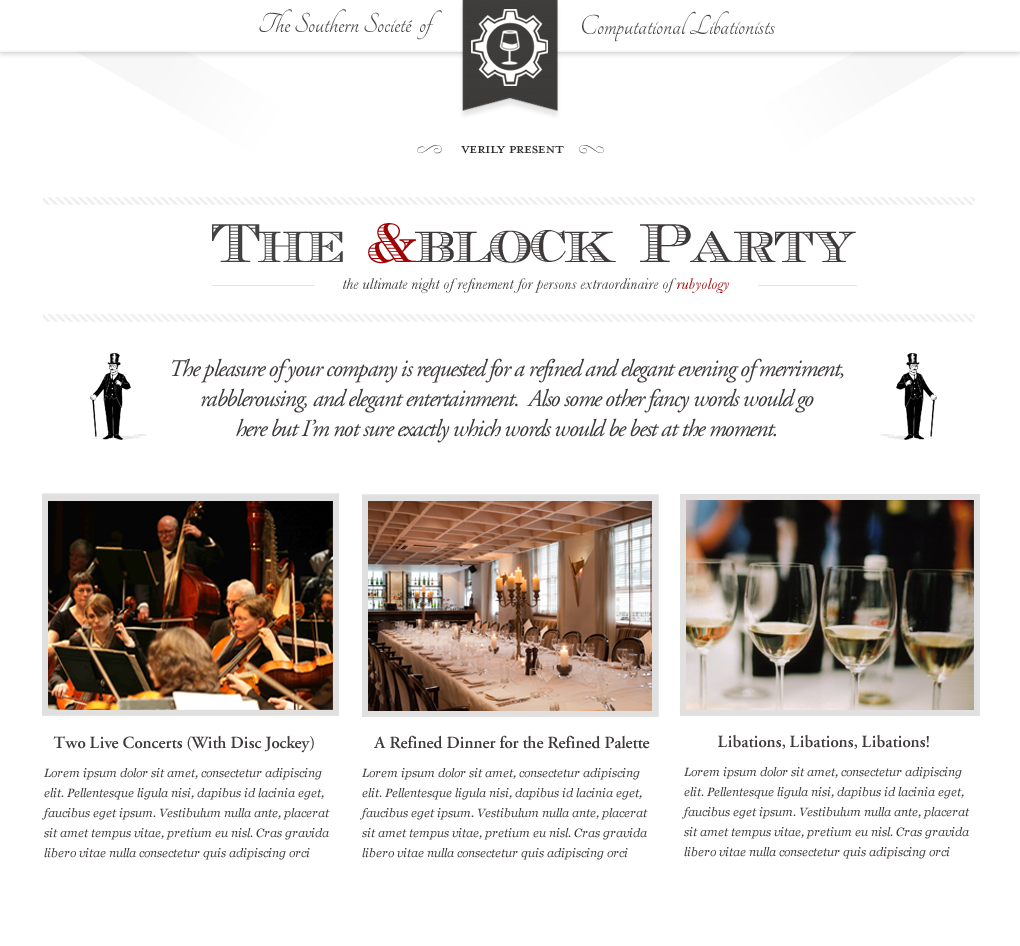
<style>
.page{position:relative;width:1020px;height:946px;background:#ffffff}
.page>*{position:absolute;margin:0}
.t1{font:30px "Tangerine";color:#474545}
.t2{font:24px "Nymphette";letter-spacing:-0.05em}
.t3{font:21px "MrsEavesPetiteCaps";letter-spacing:-0.05em;color:#2e2c2c}
.t4{font:56px "EcuyerDAX";letter-spacing:-0.05em;color:#3e3a3a}
.t5{font:56px "EcuyerDAX";letter-spacing:-0.05em;color:#424242}
.t6{font:56px "EcuyerDAX";letter-spacing:-0.05em;color:#9e0202}
.t7{font:16px "Baskerville-Italic";color:#3e3a3a}
.t8{font:16px "Baskerville-Italic";color:#9e0202}
.t9{font:24px/30px "AGaramondLT-Italic";letter-spacing:-0.05em;color:#3e3a3a}
.t10{font:17px "AGaramondLT-Semibold";color:#3e3a3a}
.t11{font:12px/20px "Georgia-Italic";color:#3e3a3a}
</style>
<div class="page">
<p class="t1" style="left:259px;top:9px;width:183px;height:31px">The Southern Societé  of</p>
<p class="t1" style="left:582px;top:11px;width:193px;height:31px">Computational Libationists</p>
<p class="t2" style="left:417px;top:145px;width:25px;height:9px;rotate:-21deg">K</p>
<p class="t3" style="left:461px;top:145px;width:103px;height:9px">verily present</p>
<p class="t2" style="left:579px;top:145px;width:25px;height:9px;rotate:-159deg">K</p>
<p class="t4" style="left:212px;top:223px;width:644px;height:41px"><span class="t5">The</span><span class="t6"> &amp;</span>block Party</p>
<p class="t7" style="left:343px;top:278px;width:386px;height:15px">the ultimate night of refinement for persons extraordinaire of <span class="t8">rubyology</span></p>
<p class="t9" style="left:172px;top:358px;width:672px;height:85px;text-align:center">The pleasure of your company is requested for a refined and elegant evening of merriment, rabblerousing, and elegant entertainment.  Also some other fancy words would go<br>here but I’m not sure exactly which words would be best at the moment.</p>
<p class="t10" style="left:53px;top:735px;width:261px;height:18px">Two Live Concerts (With Disc Jockey)</p>
<p class="t10" style="left:374px;top:735px;width:276px;height:14px">A Refined Dinner for the Refined Palette</p>
<p class="t10" style="left:718px;top:734px;width:211px;height:15px">Libations, Libations, Libations!</p>
<p class="t11" style="left:42px;top:768px;width:288px;height:92px">Lorem ipsum dolor sit amet, consectetur adipiscing elit. Pellentesque ligula nisi, dapibus id lacinia eget, faucibus eget ipsum. Vestibulum nulla ante, placerat sit amet tempus vitae, pretium eu nisl. Cras gravida libero vitae nulla consectetur quis adipiscing orci volutpat.</p>
<p class="t11" style="left:360px;top:768px;width:288px;height:92px">Lorem ipsum dolor sit amet, consectetur adipiscing elit. Pellentesque ligula nisi, dapibus id lacinia eget, faucibus eget ipsum. Vestibulum nulla ante, placerat sit amet tempus vitae, pretium eu nisl. Cras gravida libero vitae nulla consectetur quis adipiscing orci volutpat.</p>
<p class="t11" style="left:682px;top:767px;width:288px;height:92px">Lorem ipsum dolor sit amet, consectetur adipiscing elit. Pellentesque ligula nisi, dapibus id lacinia eget, faucibus eget ipsum. Vestibulum nulla ante, placerat sit amet tempus vitae, pretium eu nisl. Cras gravida libero vitae nulla consectetur quis adipiscing orci volutpat.</p>
</div>
